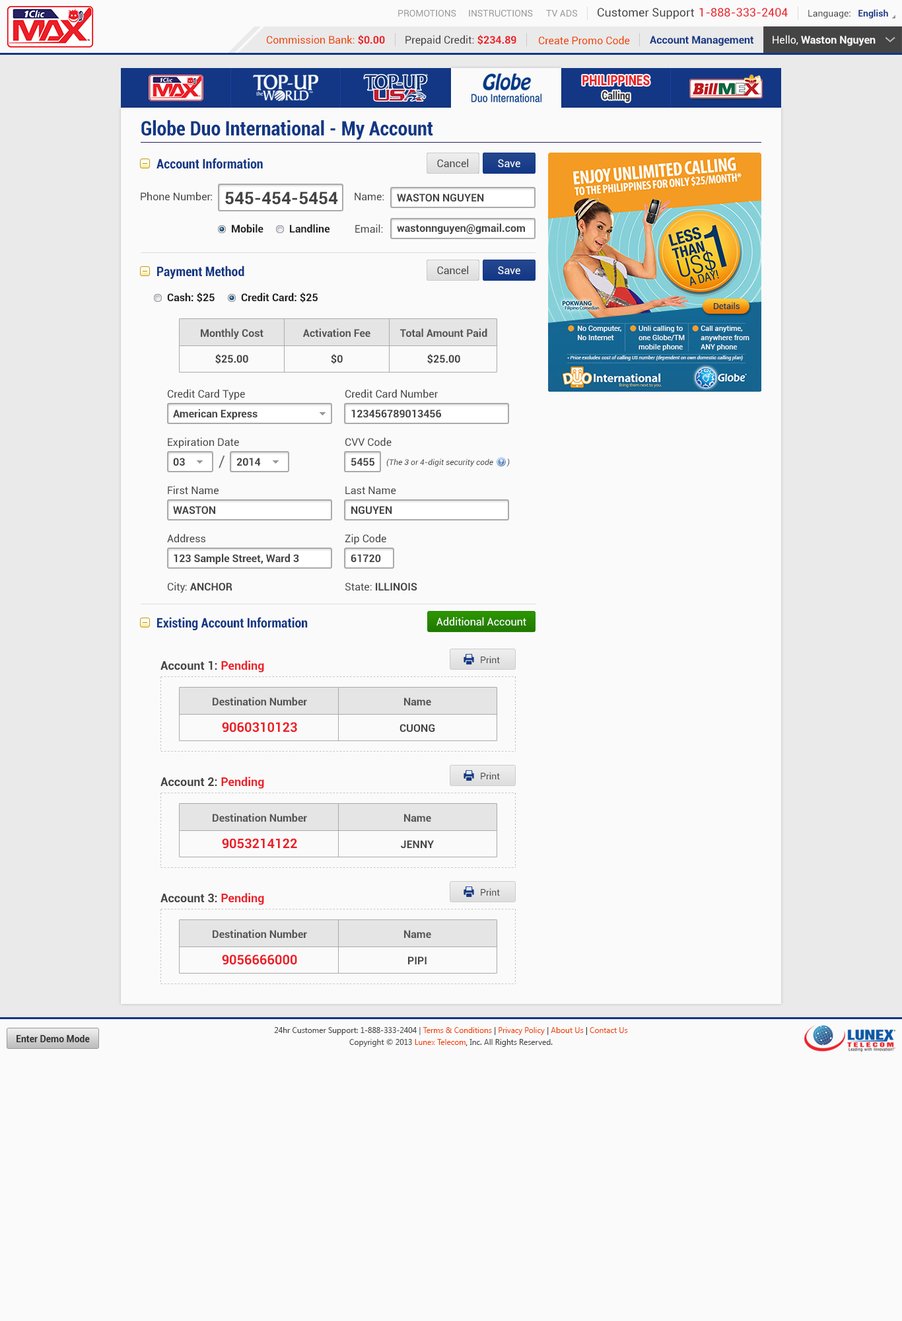
<style>
.page{position:relative;width:902px;height:1321px;background:#fafafa}
.page>*{position:absolute;margin:0}
.t1{font:9.2px "Roboto-Regular";color:#999999}
.t2{font:11.6px "Roboto-Regular";color:#444444}
.t3{font:11.6px "Roboto-Regular";color:#ec2029}
.t4{font:9.2px "Roboto-Regular";color:#444444}
.t5{font:9.2px "Roboto-Bold";color:#123785}
.t6{font:10.6px "Roboto-Regular";color:#ee4400}
.t7{font:10.6px "Roboto-Bold";color:#ec2028}
.t8{font:10.6px "Roboto-Regular";color:#444444}
.t9{font:10.6px "Roboto-Bold";color:#123785}
.t10{font:10.6px "Roboto-Bold";color:#fafafa}
.t11{font:10.6px "Roboto-Regular";color:#fafafa}
.t12{font:14.1px "Roboto-Black";color:#ec2028;scale:0.81 1}
.t13{font:11.3px "Roboto-Black";color:#333333;scale:0.81 1}
.t14{font:19.8px "Roboto-BoldCondensed";color:#123785}
.t15{font:13.2px "Roboto-BoldCondensed";color:#123785}
.t16{font:10.6px "Roboto-Regular";color:#ffffff}
.t17{font:17.2px "Roboto-Bold";color:#444444}
.t18{font:10.6px "Roboto-Bold";color:#444444}
.t19{font:10.6px "Roboto-Bold";color:#222222}
.t20{font:10.6px "Roboto-Bold";color:#555555}
.t21{font:15.9px "Roboto-Regular";color:#666666}
.t22{font:7.9px "Roboto-Italic";color:#444444}
.t23{font:11.9px "Roboto-Bold";color:#444444}
.t24{font:11.9px "Roboto-Bold";color:#ec222a}
.t25{font:13.2px "Roboto-Bold";color:#ec2028}
.t26{font:9.2px "Roboto-Bold";color:#333333}
.t27{font:7.9px/11.9px "SegoeUI";color:#444444}
.t28{font:7.9px/11.9px "SegoeUI";color:#ee4400}
.t29{font:7.9px/11.9px "SegoeUI";color:#333333}
</style>
<div class="page">
<p class="t1" style="left:398px;top:10px;width:59px;height:7px">PROMOTIONS</p>
<p class="t1" style="left:469px;top:10px;width:64px;height:7px">INSTRUCTIONS</p>
<p class="t1" style="left:546px;top:10px;width:31px;height:7px">TV ADS</p>
<p class="t2" style="left:598px;top:8px;width:96px;height:11px">Customer Support</p>
<p class="t3" style="left:700px;top:8px;width:88px;height:9px">1-888-333-2404</p>
<p class="t4" style="left:809px;top:9px;width:80px;height:9px">Language:   <span class="t5">English</span></p>
<p class="t6" style="left:267px;top:35px;width:118px;height:10px">Commission Bank: <span class="t7">$0.00</span></p>
<p class="t8" style="left:406px;top:35px;width:111px;height:11px">Prepaid Credit: <span class="t7">$234.89</span></p>
<p class="t6" style="left:539px;top:36px;width:91px;height:9px">Create Promo Code</p>
<p class="t9" style="left:650px;top:36px;width:104px;height:10px">Account Management</p>
<p class="t10" style="left:773px;top:35px;width:103px;height:11px"><span class="t11">Hello, </span>Waston Nguyen</p>
<p class="t12" style="left:583px;top:75px;width:67px;height:11px">PHILIPPINES</p>
<p class="t13" style="left:603px;top:91px;width:27px;height:11px">Calling</p>
<p class="t14" style="left:141px;top:120px;width:292px;height:20px">Globe Duo International - My Account</p>
<p class="t15" style="left:157px;top:158px;width:106px;height:11px">Account Information</p>
<p class="t8" style="left:437px;top:159px;width:31px;height:9px">Cancel</p>
<p class="t16" style="left:498px;top:159px;width:23px;height:9px">Save</p>
<p class="t8" style="left:141px;top:192px;width:71px;height:9px">Phone Number:</p>
<p class="t17" style="left:225px;top:192px;width:113px;height:13px">545-454-5454</p>
<p class="t8" style="left:355px;top:192px;width:29px;height:9px">Name:</p>
<p class="t18" style="left:397px;top:194px;width:87px;height:8px">WASTON NGUYEN</p>
<p class="t19" style="left:232px;top:224px;width:32px;height:9px">Mobile</p>
<p class="t19" style="left:290px;top:224px;width:40px;height:9px">Landline</p>
<p class="t8" style="left:355px;top:224px;width:28px;height:9px">Email:</p>
<p class="t18" style="left:397px;top:223px;width:128px;height:12px">wastonnguyen@gmail.com</p>
<p class="t15" style="left:157px;top:266px;width:87px;height:13px">Payment Method</p>
<p class="t8" style="left:437px;top:266px;width:31px;height:9px">Cancel</p>
<p class="t16" style="left:498px;top:266px;width:23px;height:9px">Save</p>
<p class="t19" style="left:167px;top:293px;width:48px;height:10px">Cash: $25</p>
<p class="t19" style="left:241px;top:293px;width:77px;height:10px">Credit Card: $25</p>
<p class="t20" style="left:201px;top:328px;width:63px;height:12px">Monthly Cost</p>
<p class="t20" style="left:303px;top:328px;width:68px;height:10px">Activation Fee</p>
<p class="t20" style="left:400px;top:328px;width:88px;height:10px">Total Amount Paid</p>
<p class="t18" style="left:215px;top:354px;width:33px;height:10px">$25.00</p>
<p class="t18" style="left:331px;top:354px;width:12px;height:10px">$0</p>
<p class="t18" style="left:427px;top:354px;width:33px;height:10px">$25.00</p>
<p class="t8" style="left:168px;top:389px;width:77px;height:11px">Credit Card Type</p>
<p class="t8" style="left:346px;top:389px;width:92px;height:9px">Credit Card Number</p>
<p class="t18" style="left:173px;top:409px;width:85px;height:11px">American Express</p>
<p class="t18" style="left:351px;top:410px;width:90px;height:8px">123456789013456</p>
<p class="t8" style="left:168px;top:437px;width:71px;height:12px">Expiration Date</p>
<p class="t8" style="left:346px;top:437px;width:46px;height:9px">CVV Code</p>
<p class="t18" style="left:173px;top:458px;width:12px;height:8px">03</p>
<p class="t21" style="left:219px;top:455px;width:6px;height:13px">/</p>
<p class="t18" style="left:237px;top:458px;width:24px;height:8px">2014</p>
<p class="t18" style="left:351px;top:458px;width:24px;height:8px">5455</p>
<p class="t22" style="left:386px;top:458px;width:124px;height:9px">(The 3 or 4-digit security code       )</p>
<p class="t8" style="left:168px;top:486px;width:51px;height:9px">First Name</p>
<p class="t8" style="left:346px;top:486px;width:50px;height:9px">Last Name</p>
<p class="t18" style="left:173px;top:506px;width:42px;height:8px">WASTON</p>
<p class="t18" style="left:351px;top:506px;width:41px;height:8px">NGUYEN</p>
<p class="t8" style="left:167px;top:534px;width:38px;height:8px">Address</p>
<p class="t8" style="left:345px;top:534px;width:41px;height:11px">Zip Code</p>
<p class="t18" style="left:174px;top:554px;width:125px;height:11px">123 Sample Street, Ward 3</p>
<p class="t18" style="left:351px;top:554px;width:30px;height:8px">61720</p>
<p class="t18" style="left:168px;top:582px;width:65px;height:11px"><span class="t8">City: </span>ANCHOR</p>
<p class="t18" style="left:346px;top:583px;width:72px;height:8px"><span class="t8">State: </span>ILLINOIS</p>
<p class="t15" style="left:157px;top:617px;width:151px;height:14px">Existing Account Information</p>
<p class="t16" style="left:437px;top:617px;width:90px;height:9px">Additional Account</p>
<p class="t23" style="left:161px;top:661px;width:103px;height:12px">Account 1: <span class="t24">Pending</span></p>
<p class="t4" style="left:481px;top:656px;width:19px;height:7px">Print</p>
<p class="t20" style="left:213px;top:697px;width:94px;height:9px">Destination Number</p>
<p class="t20" style="left:404px;top:698px;width:27px;height:8px">Name</p>
<p class="t25" style="left:222px;top:722px;width:75px;height:11px">9060310123</p>
<p class="t18" style="left:400px;top:724px;width:35px;height:8px">CUONG</p>
<p class="t4" style="left:481px;top:772px;width:19px;height:8px">Print</p>
<p class="t23" style="left:161px;top:777px;width:103px;height:12px">Account 2: <span class="t24">Pending</span></p>
<p class="t20" style="left:213px;top:813px;width:94px;height:10px">Destination Number</p>
<p class="t20" style="left:404px;top:814px;width:27px;height:9px">Name</p>
<p class="t25" style="left:222px;top:838px;width:75px;height:11px">9053214122</p>
<p class="t18" style="left:401px;top:840px;width:33px;height:8px">JENNY</p>
<p class="t23" style="left:161px;top:893px;width:103px;height:12px">Account 3: <span class="t24">Pending</span></p>
<p class="t4" style="left:481px;top:889px;width:19px;height:7px">Print</p>
<p class="t20" style="left:213px;top:930px;width:94px;height:9px">Destination Number</p>
<p class="t20" style="left:404px;top:930px;width:27px;height:9px">Name</p>
<p class="t25" style="left:222px;top:955px;width:75px;height:10px">9056666000</p>
<p class="t18" style="left:408px;top:957px;width:19px;height:8px">PIPI</p>
<p class="t26" style="left:17px;top:1035px;width:73px;height:8px">Enter Demo Mode</p>
<p class="t27" style="left:274px;top:1027px;width:354px;height:20px;text-align:center">24hr Customer Support: 1-888-333-2404 | <span class="t28">Terms &amp; Conditions</span><span class="t29"> | </span><span class="t28">Privacy Policy</span><span class="t29"> | </span><span class="t28">About Us</span><span class="t29"> | </span><span class="t28">Contact Us<br></span>Copyright © 2013 <span class="t28">Lunex Telecom</span><span class="t29">,</span> Inc. All Rights Reserved.</p>
</div>
